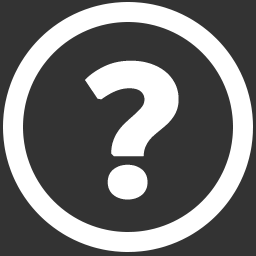
<style>
.page{position:relative;width:256px;height:256px;background:#333333}
.page>*{position:absolute;margin:0}
.t1{font:183.6px "BreezeSans-Bold";color:#ffffff;font-weight:bold;scale:1.05 1}
</style>
<div class="page">
<p class="t1" style="left:85px;top:60px;width:94px;height:140px">?</p>
</div>
